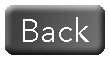
<style>
.page{position:relative;width:110px;height:60px;background:#ffffff}
.page>*{position:absolute;margin:0}
.t1{font:31.6px "AvenirNext-Regular";color:#ffffff}
</style>
<div class="page">
<p class="t1" style="left:23px;top:17px;width:66px;height:25px">Back</p>
</div>
